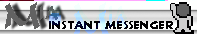
<style>
.page{position:relative;width:197px;height:34px;background:#fefffe}
.page>*{position:absolute;margin:0}
.t1{font:12px "Informal011BT-Roman";color:#000000}
</style>
<div class="page">
<p class="t1" style="left:49px;top:21px;width:124px;height:8px">Instant Messenger</p>
</div>
